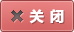
<style>
.page{position:relative;width:74px;height:32px}
.page>*{position:absolute;margin:0}
.t1{font:14px "MicrosoftYaHei-Bold";letter-spacing:0.05em;color:#ffffff;font-weight:bold}
</style>
<div class="page">
<p class="t1" style="left:29px;top:9px;width:35px;height:15px">关 闭</p>
</div>
